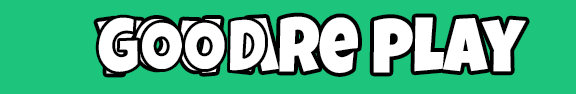
<style>
.page{position:relative;width:576px;height:94px;background:#1cc57b}
.page>*{position:absolute;margin:0}
.t1{font:77.3px "LuckiestGuy-Regular";color:#ffffff;scale:0.89 1}
</style>
<div class="page">
<p class="t1" style="left:97px;top:16px;width:429px;height:58px">You are play</p>
<p class="t1" style="left:97px;top:16px;width:170px;height:58px">GOOD</p>
</div>
